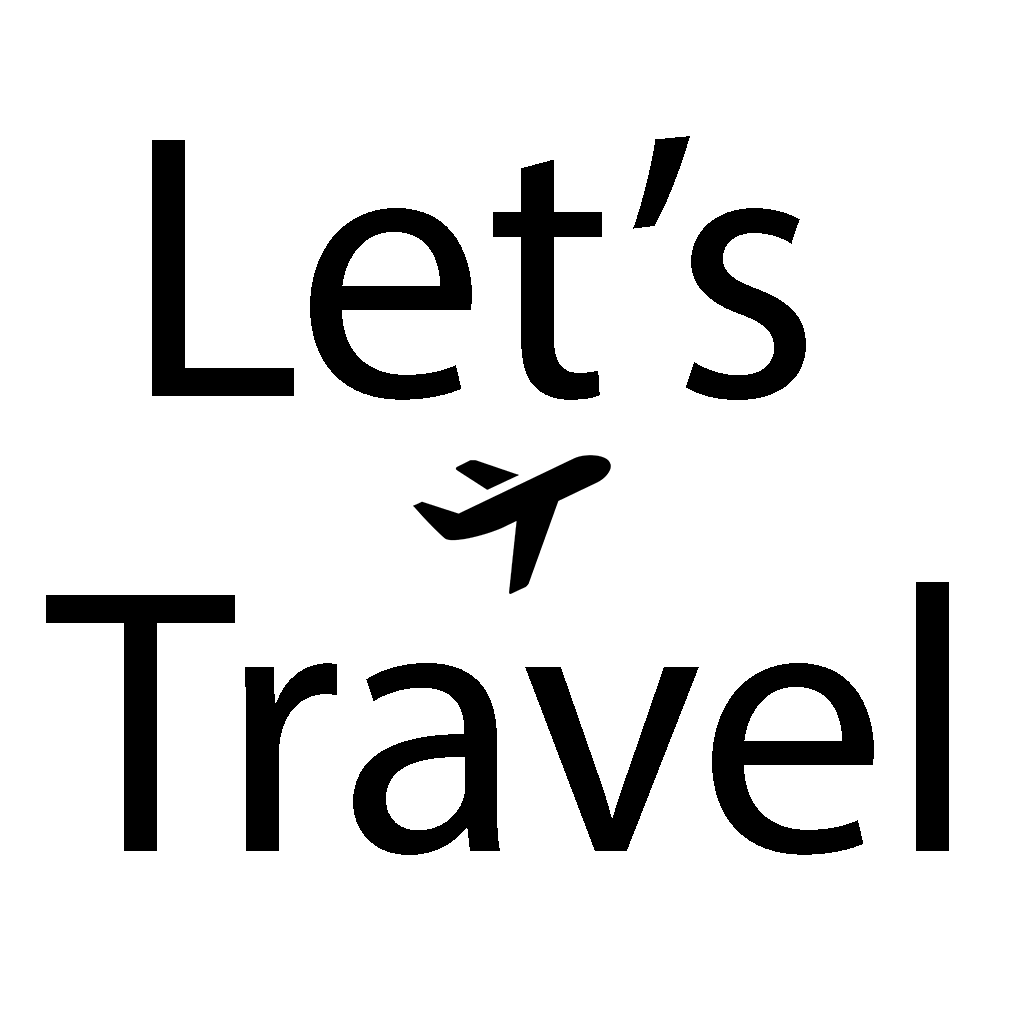
<style>
.page{position:relative;width:1024px;height:1024px;background:#ffffff}
.page>*{position:absolute;margin:0}
.t1{font:379.2px "MyriadPro-Regular";color:#000000}
</style>
<div class="page">
<p class="t1" style="left:46px;top:136px;width:903px;height:719px;text-align:center">Let’s <br>Travel</p>
</div>
